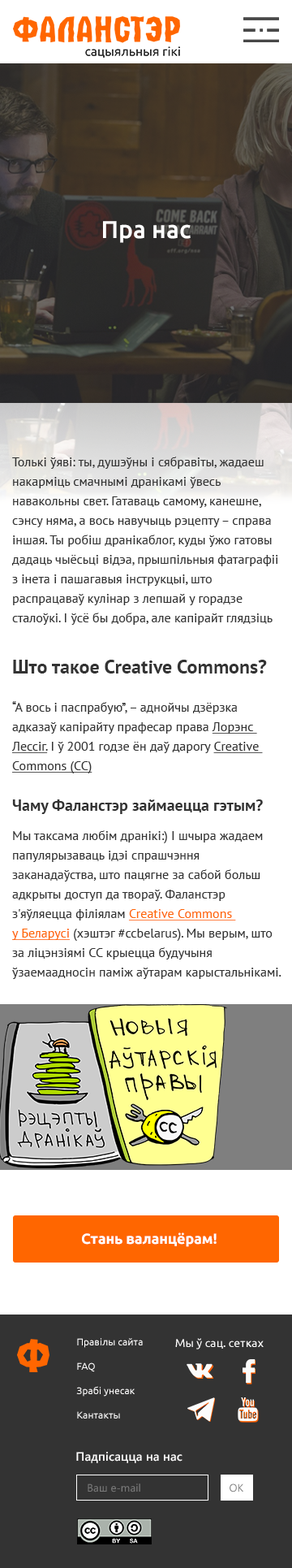
<style>
.page{position:relative;width:292px;height:1568px;background:#ffffff}
.page>*{position:absolute;margin:0}
.t1{font:24.4px "Ubuntu-Medium";color:#ffffff}
.t2{font:13px/19.5px "PTSans-Regular";color:#333333}
.t3{font:19.5px "PTSans-Bold";color:#333333}
.t4{font:13px/19.5px "PTSans-Regular";color:#333333;text-decoration:underline}
.t5{font:16.2px "PTSans-Bold";color:#333333}
.t6{font:13px/19.5px "PTSans-Regular";color:#ff6600;text-decoration:underline}
.t7{font:14.6px "Ubuntu-Bold";letter-spacing:-0.01em;color:#ffffff}
.t8{font:9.7px/24.3px "Ubuntu-Regular";letter-spacing:0.005em;color:#fffefe}
.t9{font:11.4px "Ubuntu-Regular";letter-spacing:0.005em;color:#ffffff}
.t10{font:11.4px "Ubuntu-Regular";letter-spacing:0.005em;color:#fffefe}
.t11{font:12.1px "SegoeUI-Semibold";letter-spacing:0.005em;color:#fffefe}
.t12{font:10.8px "SegoeUI";letter-spacing:0.005em;color:#7b7b7b}
</style>
<div class="page">
<p class="t1" style="left:103px;top:221px;width:88px;height:22px">Пра нас</p>
<p class="t2" style="left:12px;top:457px;width:267px;height:168px">Толькі ўяві: ты, душэўны і сябравіты, жадаеш <br>накарміць смачнымі дранікамі ўвесь <br>навакольны свет. Гатаваць самому, канешне, <br>сэнсу няма, а вось навучыць рэцепту – справа <br>іншая. Ты робіш дранікаблог, куды ўжо гатовы <br>дадаць чыёсьці відэа, прышпільныя фатаграфіі<br>з інета і пашагавыя інструкцыі, што <br>распрацаваў кулінар з лепшай у горадзе <br>сталоўкі. І ўсё бы добра, але капірайт глядзіць</p>
<p class="t3" style="left:13px;top:660px;width:254px;height:14px">Што такое Creative Commons?</p>
<p class="t2" style="left:11px;top:701px;width:252px;height:72px">“А вось і паспрабую”, – аднойчы дзёрзка <br>адказаў капірайту прафесар права <span class="t4">Лорэнс <br>Лессіг.</span> І ў 2001 годзе ён даў дарогу <span class="t4">Creative <br>Commons (CC)</span></p>
<p class="t5" style="left:12px;top:799px;width:251px;height:15px">Чаму Фаланстэр займаецца гэтым?</p>
<p class="t2" style="left:12px;top:830px;width:270px;height:149px">Мы таксама любім дранікі:) І шчыра жадаем <br>папулярызаваць ідэі спрашчэння <br>заканадаўства, што пацягне за сабой больш <br>адкрыты доступ да твораў. Фаланстэр <br>з'яўляецца філіялам <span class="t6">Creative Commons <br>у Беларусі </span>(хэштэг #ccbelarus). Мы верым, што <br>за ліцэнзіямі СС крыецца будучыня <br>ўзаемаадносін паміж аўтарам карыстальнікамі.</p>
<p class="t7" style="left:82px;top:1232px;width:135px;height:15px">Стань валанцёрам!</p>
<p class="t8" style="left:76px;top:1338px;width:67px;height:81px">Правiлы сайта<br>FAQ<br>Зрабi унесак<br>Кантакты</p>
<p class="t9" style="left:175px;top:1338px;width:89px;height:11px"><span class="t10">Мы </span>ў сац. сетках</p>
<p class="t11" style="left:76px;top:1452px;width:107px;height:11px">Падпiсацца на нас</p>
<p class="t12" style="left:88px;top:1484px;width:53px;height:8px">Ваш e-mail</p>
<p class="t12" style="left:230px;top:1484px;width:14px;height:8px">ОК</p>
</div>
